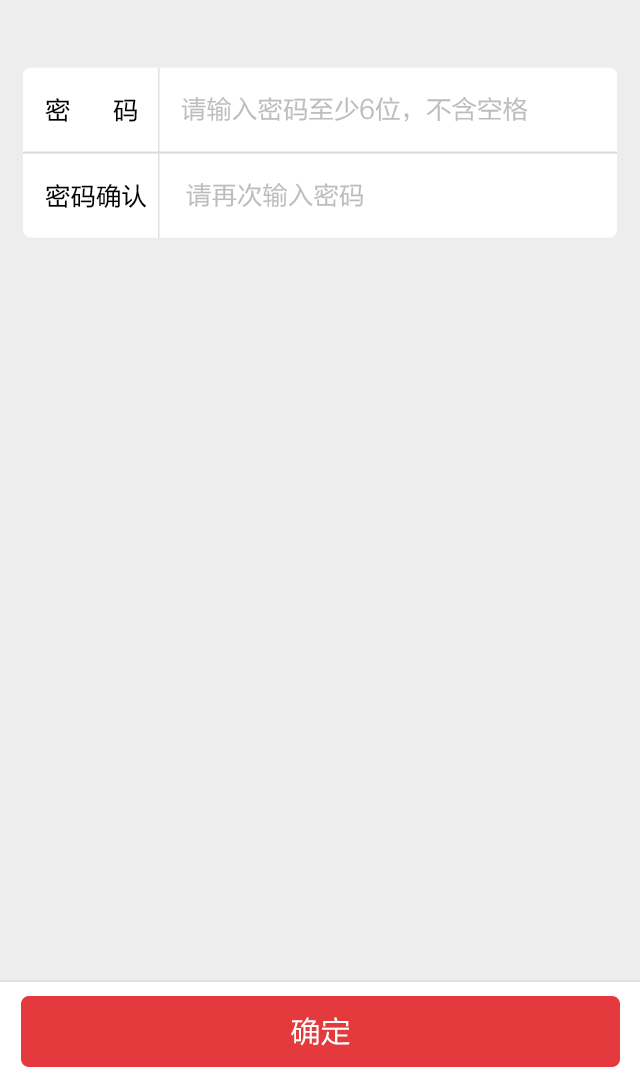
<style>
.page{position:relative;width:640px;height:1080px;background:#ededed}
.page>*{position:absolute;margin:0}
.t1{font:25.5px "FZLTHJW--GB1-0";color:#000000}
.t2{font:25.5px "FZLTHJW--GB1-0";color:#bdbdbd}
.t3{font:30px "FZLTHJW--GB1-0";color:#ffffff}
</style>
<div class="page">
<p class="t1" style="left:45px;top:98px;width:92px;height:24px">密      码</p>
<p class="t2" style="left:181px;top:96px;width:347px;height:26px">请输入密码至少6位，不含空格</p>
<p class="t1" style="left:45px;top:184px;width:101px;height:24px">密码确认</p>
<p class="t2" style="left:186px;top:182px;width:177px;height:25px">请再次输入密码</p>
<p class="t3" style="left:291px;top:1017px;width:59px;height:29px">确定</p>
</div>
